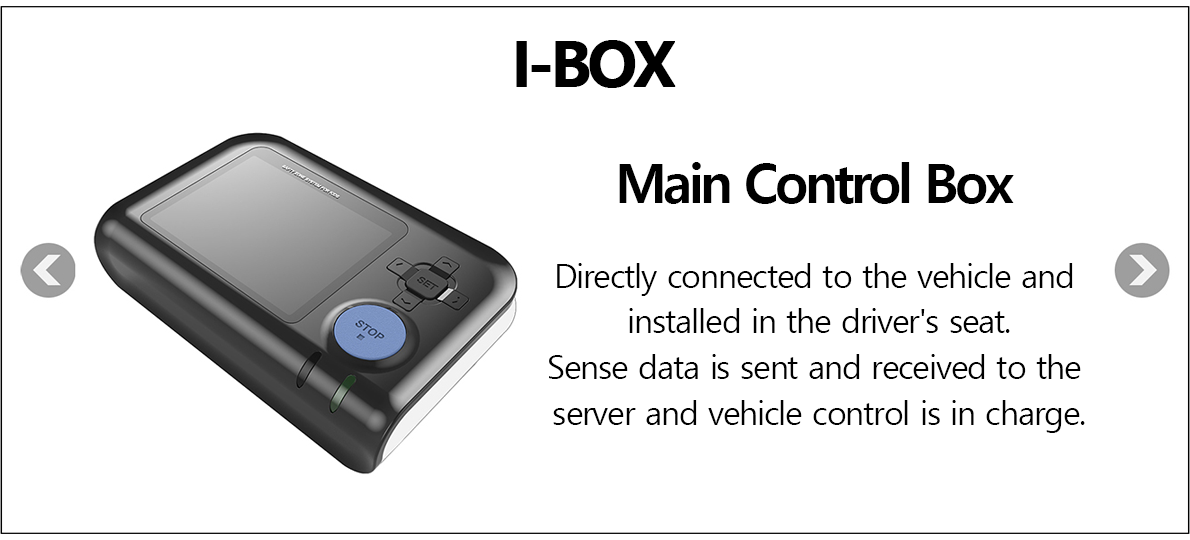
<style>
.page{position:relative;width:1190px;height:540px;background:#ffffff}
.page>*{position:absolute;margin:0}
.t1{font:62.5px "MalgunGothicBold";letter-spacing:-0.07em;color:#000000;font-weight:bold}
.t2{font:54.2px "MalgunGothicBold";letter-spacing:-0.07em;color:#000000}
.t3{font:33.3px/45.8px "MalgunGothic";letter-spacing:-0.04em;color:#000000}
</style>
<div class="page">
<p class="t1" style="left:516px;top:40px;width:160px;height:48px">I-BOX</p>
<p class="t2" style="left:619px;top:162px;width:395px;height:42px">Main Control Box</p>
<p class="t3" style="left:549px;top:263px;width:536px;height:170px;text-align:center">Directly connected to the vehicle and <br>installed in the driver's seat.<br>Sense data is sent and received to the <br>server and vehicle control is in charge.</p>
</div>
